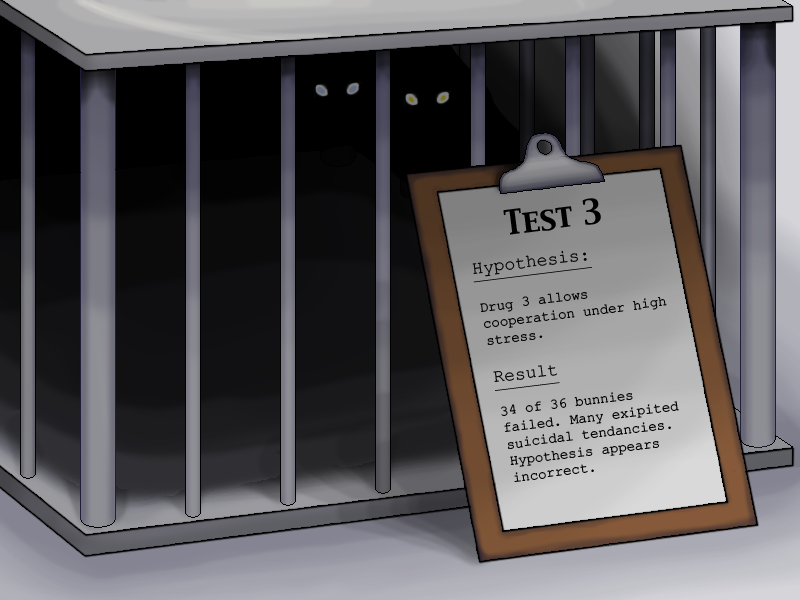
<style>
.page{position:relative;width:800px;height:600px}
.page>*{position:absolute;margin:0}
.t1{font:30px "CapitalsRegular";color:#000000}
.t2{font:14px "CourierNewPSMT";color:#000000}
.t3{font:18px "CourierNewPSMT";color:#000000;text-decoration:underline}
</style>
<div class="page">
<p class="t1" style="left:503px;top:198px;width:98px;height:37px;rotate:-7deg">Test 3</p>
<p class="t2" style="left:472px;top:250px;width:207px;height:232px;rotate:-7deg"><span class="t3">Hypothesis:<br><br></span>Drug 3 allows cooperation under high stress.<br><br><span class="t3">Result<br></span><br>34 of 36 bunnies failed. Many exipited suicidal tendancies. Hypothesis appears incorrect.</p>
</div>
